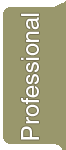
<style>
.page{position:relative;width:66px;height:150px;background:#99976c}
.page>*{position:absolute;margin:0}
.t1{font:24px "Helvetica";letter-spacing:-0.01em;color:#ffffff}
</style>
<div class="page">
<p class="t1" style="left:21px;top:13px;width:18px;height:127px;rotate:-90deg">Professional</p>
</div>
